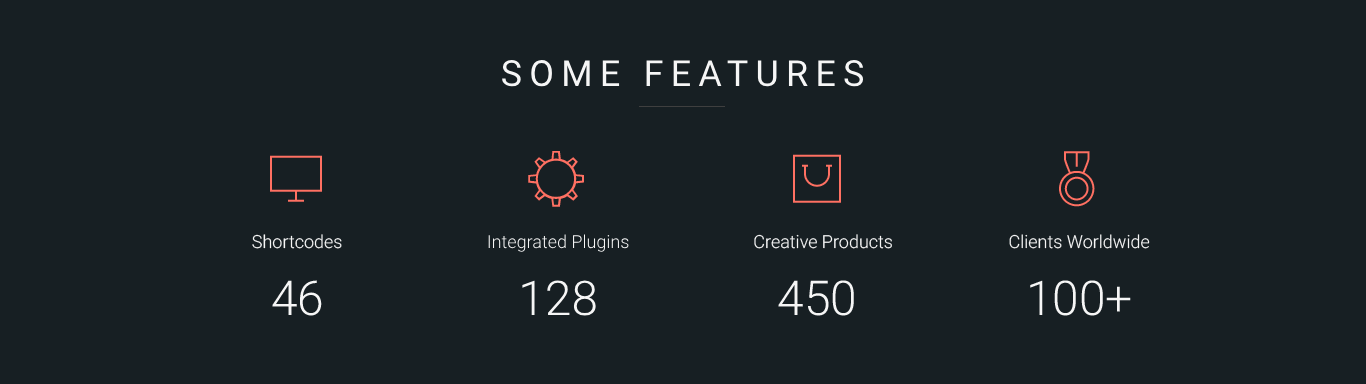
<style>
.page{position:relative;width:1366px;height:384px;background:#171f23}
.page>*{position:absolute;margin:0}
.t1{font:36px "Roboto-Regular";letter-spacing:0.2em;color:#f6f6f6}
.t2{font:18px "Roboto-Light";color:#f6f6f6}
.t3{font:48px "Roboto-Light";color:#f6f6f6}
</style>
<div class="page">
<p class="t1" style="left:502px;top:60px;width:362px;height:27px">SOME FEATURES</p>
<p class="t2" style="left:252px;top:234px;width:90px;height:15px">Shortcodes</p>
<p class="t2" style="left:488px;top:234px;width:141px;height:18px">Integrated Plugins</p>
<p class="t2" style="left:754px;top:234px;width:138px;height:15px">Creative Products</p>
<p class="t2" style="left:1009px;top:234px;width:141px;height:15px">Clients Worldwide</p>
<p class="t3" style="left:272px;top:280px;width:50px;height:36px">46</p>
<p class="t3" style="left:522px;top:280px;width:74px;height:36px">128</p>
<p class="t3" style="left:778px;top:280px;width:76px;height:36px">450</p>
<p class="t3" style="left:1030px;top:280px;width:101px;height:36px">100+</p>
</div>
